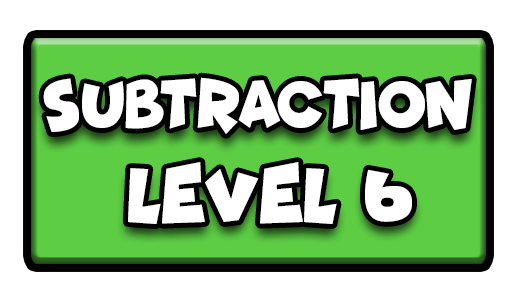
<style>
.page{position:relative;width:517px;height:301px;background:#ffffff}
.page>*{position:absolute;margin:0}
.t1{font:68.8px "Funhouse";color:#ffffff;scale:0.85 1}
.t2{font:77.7px "Funhouse";color:#ffffff;scale:0.95 1}
</style>
<div class="page">
<p class="t1" style="left:43px;top:77px;width:429px;height:57px">SUBTRACTION</p>
<p class="t2" style="left:128px;top:162px;width:284px;height:62px">LEVEL 6</p>
</div>
